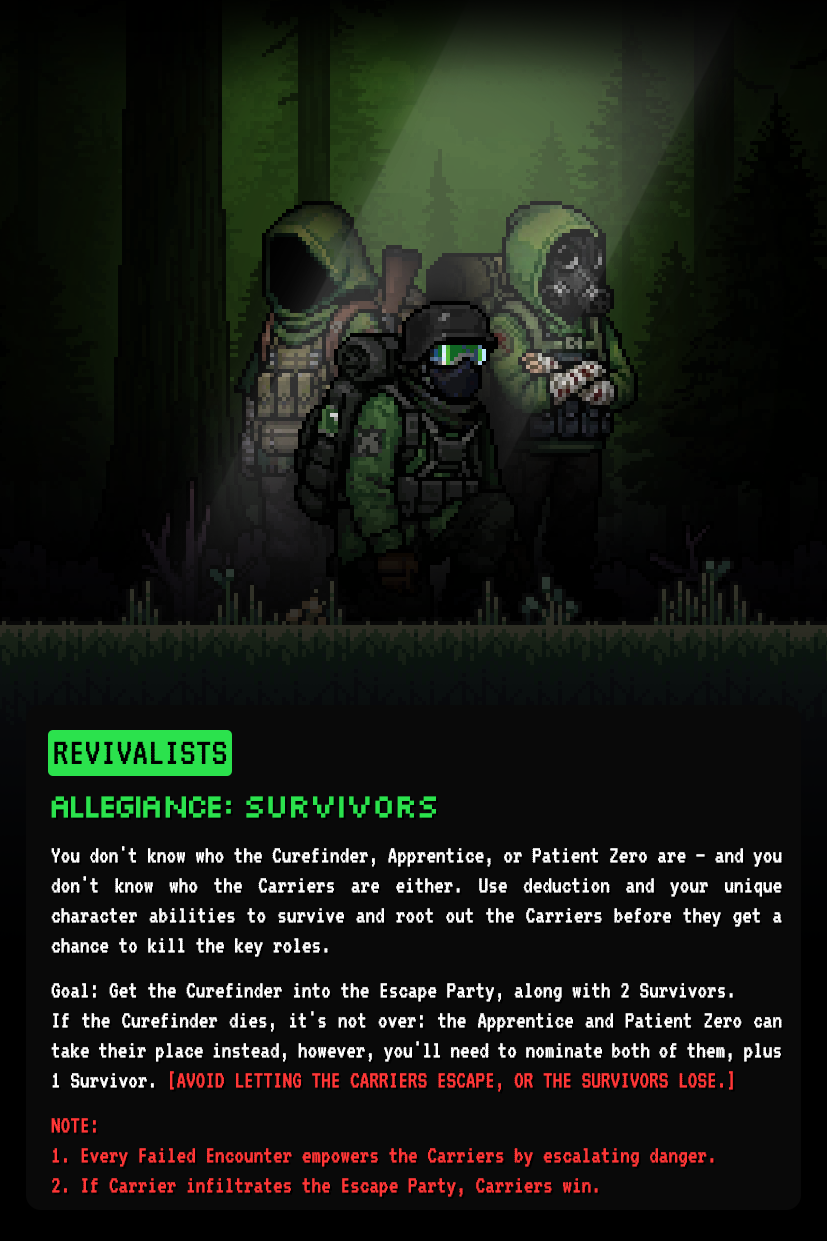
<style>
.page{position:relative;width:827px;height:1241px;background:#090909}
.page>*{position:absolute;margin:0}
.t1{font:39.7px "VT323-Regular";color:#000000}
.t2{font:25px "VT323-Regular";color:#ffffff;scale:0.96 1}
.t3{font:33.3px "Silkscreen-Regular";letter-spacing:-0.05em;color:#2be24d;scale:0.96 1}
.t4{font:25px "VT323-Regular";color:#ff3737;scale:0.96 1}
</style>
<div class="page">
<p class="t1" style="left:54px;top:741px;width:173px;height:23px">REVIVALISTS</p>
<p class="t2" style="left:51px;top:796px;width:731px;height:401px;text-align:justify"><span class="t3">allegiancE: SURVIVORS<br><br></span>You don't know who the Curefinder, Apprentice, or Patient Zero are — and you don't know who the Carriers are either. Use deduction and your unique character abilities to survive and root out the Carriers before they get a chance to kill the key roles.<br><br>Goal: Get the Curefinder into the Escape Party, along with 2 Survivors. <br>If the Curefinder dies, it's not over: the Apprentice and Patient Zero can take their place instead, however, you'll need to nominate both of them, plus 1 Survivor. <span class="t4">[AVOID LETTING THE CARRIERS ESCAPE, OR THE SURVIVORS LOSE.]<br><br>NOTE: <br>1. Every Failed Encounter empowers the Carriers by escalating danger.<br>2. If Carrier infiltrates the Escape Party, Carriers win.</span></p>
</div>
